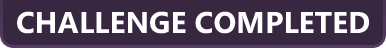
<style>
.page{position:relative;width:386px;height:48px;background:#372740}
.page>*{position:absolute;margin:0}
.t1{font:30px "SegoeWP-Bold";color:#ffffff}
</style>
<div class="page">
<p class="t1" style="left:17px;top:11px;width:352px;height:23px">CHALLENGE COMPLETED</p>
</div>
